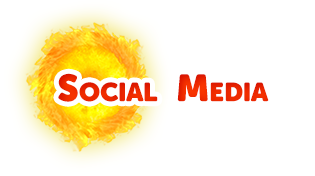
<style>
.page{position:relative;width:315px;height:176px;background:#ffffff}
.page>*{position:absolute;margin:0}
.t1{font:37.5px "MuseoSansRounded-1000";color:#ff3c00;font-variant:small-caps}
</style>
<div class="page">
<p class="t1" style="left:58px;top:73px;width:211px;height:29px">Social  Media</p>
</div>
